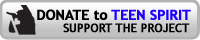
<style>
.page{position:relative;width:200px;height:40px}
.page>*{position:absolute;margin:0}
.t1{font:14px "TrebuchetMS-Bold";letter-spacing:-0.02em;color:#1e00ff;font-weight:bold}
.t2{font:14px "TrebuchetMS-Bold";letter-spacing:-0.02em;color:#000000;font-weight:bold}
.t3{font:12px "TrebuchetMS";letter-spacing:-0.02em;color:#000000;font-weight:bold}
</style>
<div class="page">
<p class="t1" style="left:37px;top:9px;width:154px;height:11px"><span class="t2">DONATE to </span>TEEN SPIRIT</p>
<p class="t3" style="left:63px;top:23px;width:127px;height:10px">SUPPORT THE PROJECT</p>
</div>
